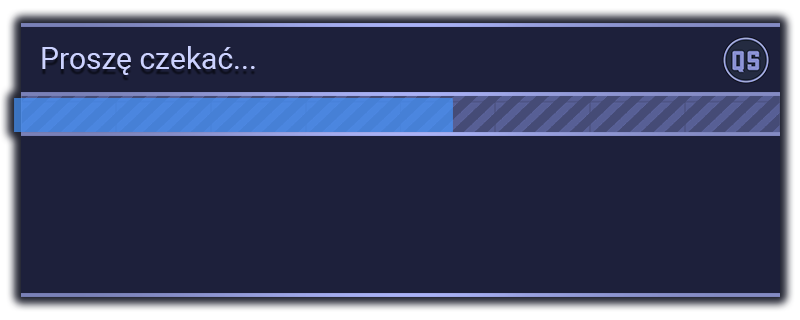
<style>
.page{position:relative;width:800px;height:320px;background:#1d203b}
.page>*{position:absolute;margin:0}
.t1{font:30px "Roboto-Regular";color:#ccd2ff}
</style>
<div class="page">
<p class="t1" style="left:42px;top:46px;width:213px;height:29px">Proszę czekać...</p>
</div>
